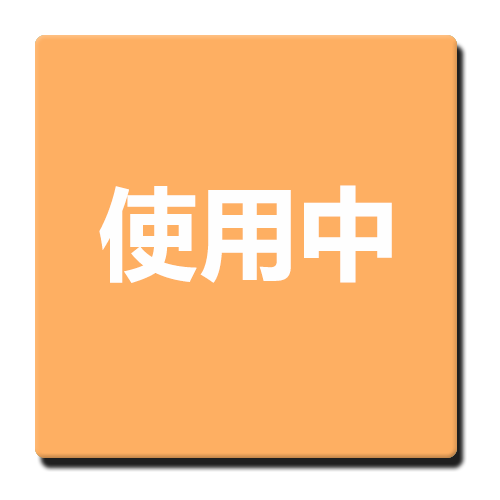
<style>
.page{position:relative;width:500px;height:500px;background:#feaf62}
.page>*{position:absolute;margin:0}
.t1{font:100px "MicrosoftYaHei-Bold";color:#fefefe}
</style>
<div class="page">
<p class="t1" style="left:99px;top:185px;width:293px;height:98px">使用中</p>
</div>
